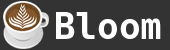
<style>
.page{position:relative;width:170px;height:50px;background:#333333}
.page>*{position:absolute;margin:0}
.t1{font:36px "Hack-Bold";color:#ffffff}
</style>
<div class="page">
<p class="t1" style="left:56px;top:12px;width:105px;height:27px">Bloom</p>
</div>
